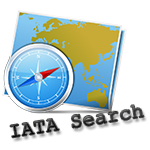
<style>
.page{position:relative;width:150px;height:150px;background:#ffffff}
.page>*{position:absolute;margin:0}
.t1{font:20.6px "CourierNewPSMT"}
</style>
<div class="page">
<p class="t1" style="left:10px;top:105px;width:134px;height:33px;rotate:-9deg">IATA Search</p>
</div>
